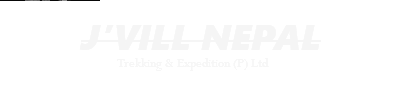
<style>
.page{position:relative;width:400px;height:100px;background:#ffffff}
.page>*{position:absolute;margin:0}
.t1{font:14px/6px "Perpetua";color:#f6f6f6}
.t2{font:36px/6px "SegoeUIBlack-Italic";color:#f5f5f5}
</style>
<div class="page">
<p class="t1" style="left:63px;top:25px;width:242px;height:46px"><span class="t2">J’VILL NEPAL<br> </span>Trekking &amp; Expedition (P) Ltd</p>
</div>
